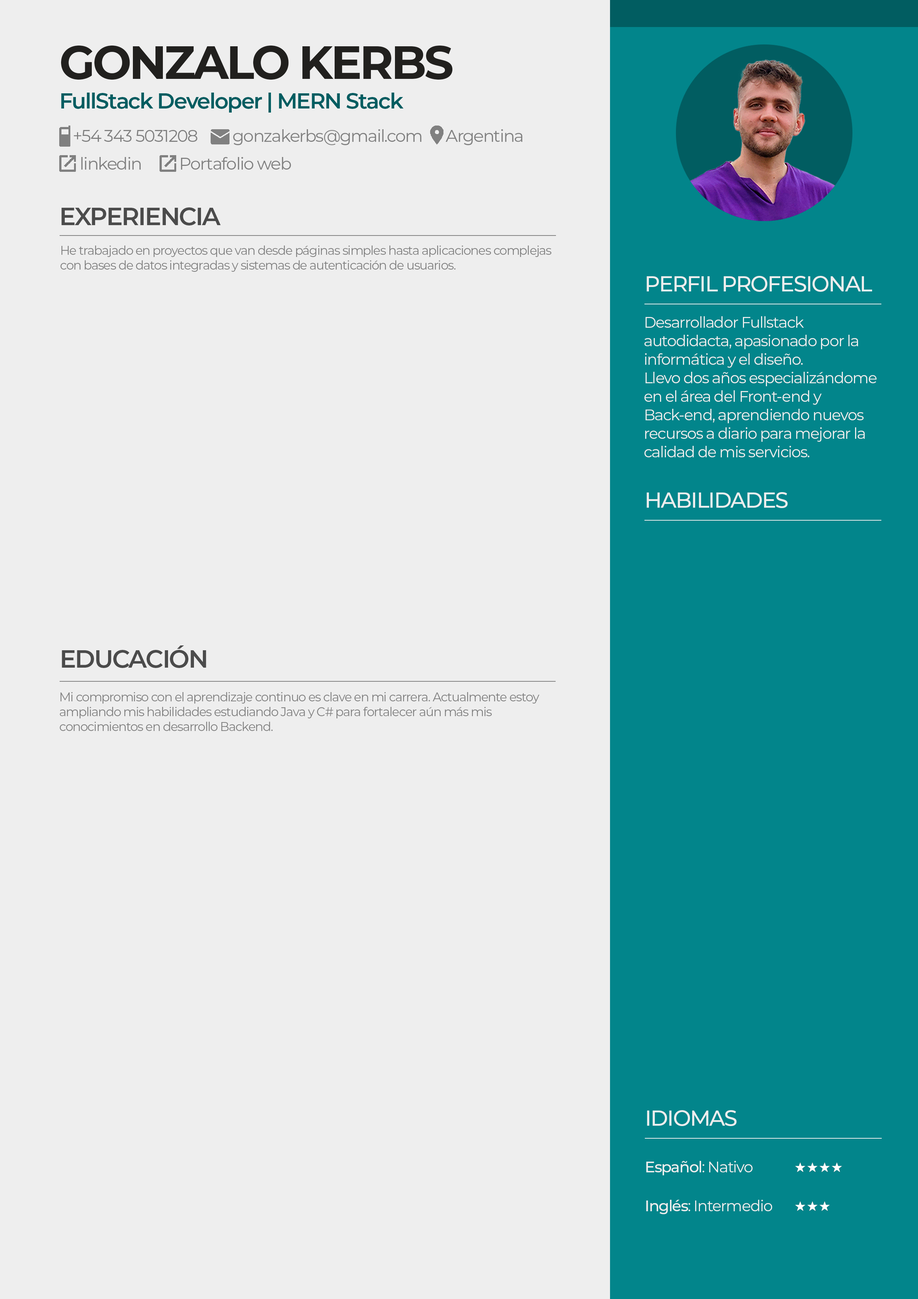
<style>
.page{position:relative;width:918px;height:1299px;background:#eeeeee}
.page>*{position:absolute;margin:0}
.t1{font:46.3px "Montserrat-Bold";letter-spacing:-0.05em;color:#21201e}
.t2{font:21.6px "Montserrat-SemiBold";letter-spacing:-0.05em;color:#015d61}
.t3{font:24.7px "Montserrat-SemiBold";letter-spacing:-0.05em;color:#4b4b4b}
.t4{font:12.3px "Montserrat-Regular";letter-spacing:-0.05em;color:#808080}
.t5{font:21.6px "Montserrat-Medium";letter-spacing:-0.05em;color:#eeeeee}
.t6{font:15.4px "Montserrat-Regular";letter-spacing:-0.05em;color:#eeeeee}
.t7{font:15.4px "Montserrat-Medium";letter-spacing:-0.05em;color:#eeeeee}
</style>
<div class="page">
<p class="t1" style="left:61px;top:45px;width:392px;height:35px">GONZALO KERBS</p>
<p class="t2" style="left:61px;top:93px;width:343px;height:20px">FullStack Developer | MERN Stack</p>
<p class="t3" style="left:61px;top:207px;width:160px;height:18px">EXPERIENCIA</p>
<p class="t4" style="left:60px;top:245px;width:492px;height:27px">He trabajado en proyectos que van desde páginas simples hasta aplicaciones complejas con bases de datos integradas y sistemas de autenticación de usuarios.</p>
<p class="t5" style="left:647px;top:276px;width:225px;height:16px">PERFIL PROFESIONAL</p>
<p class="t6" style="left:645px;top:316px;width:232px;height:141px">Desarrollador Fullstack autodidacta, apasionado por la informática y el diseño.<br>Llevo dos años especializándome en el área del Front-end y Back-end, aprendiendo nuevos recursos a diario para mejorar la calidad de mis servicios.</p>
<p class="t5" style="left:647px;top:492px;width:141px;height:16px">HABILIDADES</p>
<p class="t3" style="left:62px;top:645px;width:144px;height:23px">EDUCACIÓN</p>
<p class="t4" style="left:60px;top:692px;width:479px;height:39px">Mi compromiso con el aprendizaje continuo es clave en mi carrera. Actualmente estoy ampliando mis habilidades estudiando Java y C# para fortalecer aún más mis conocimientos en desarrollo Backend.</p>
<p class="t5" style="left:647px;top:1110px;width:90px;height:16px">IDIOMAS</p>
<p class="t6" style="left:646px;top:1161px;width:126px;height:53px"><span class="t7">Español</span>: Nativo        <br>  <br><span class="t7">Inglés</span>: Intermedio</p>
</div>
